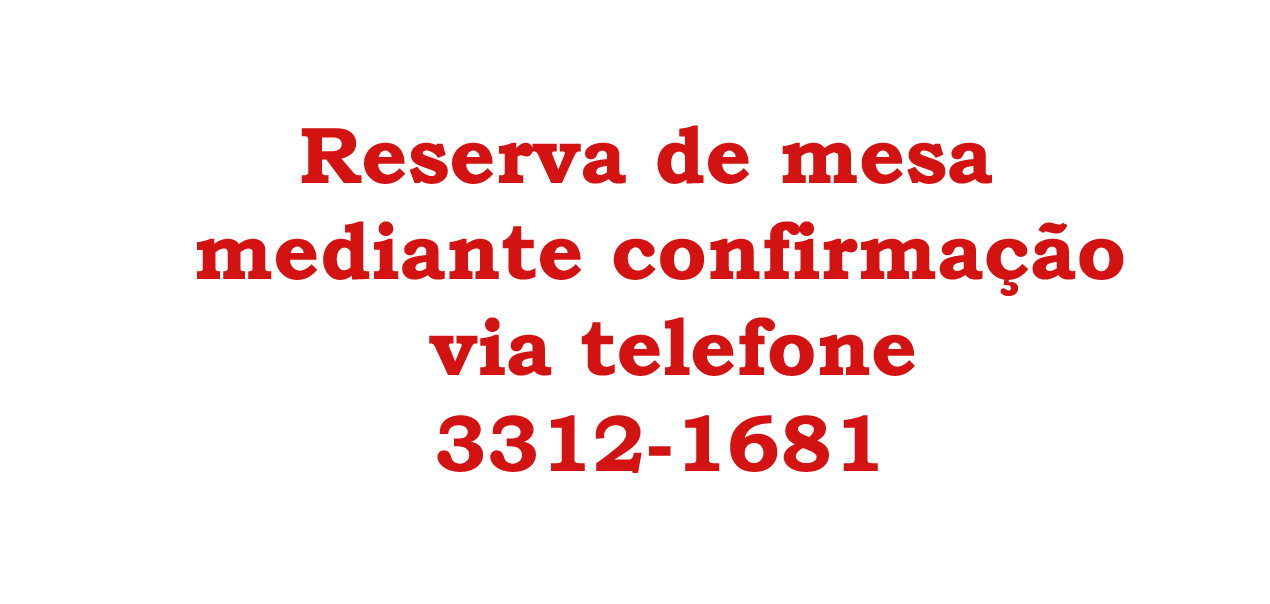
<style>
.page{position:relative;width:1270px;height:604px;background:#ffffff}
.page>*{position:absolute;margin:0}
.t1{font:80px "BookmanOldStyle-Bold";color:#d31212}
</style>
<div class="page">
<p class="t1" style="left:197px;top:125px;width:927px;height:348px;text-align:center">Reserva de mesa <br>mediante confirmação<br> via telefone<br>3312-1681</p>
</div>
